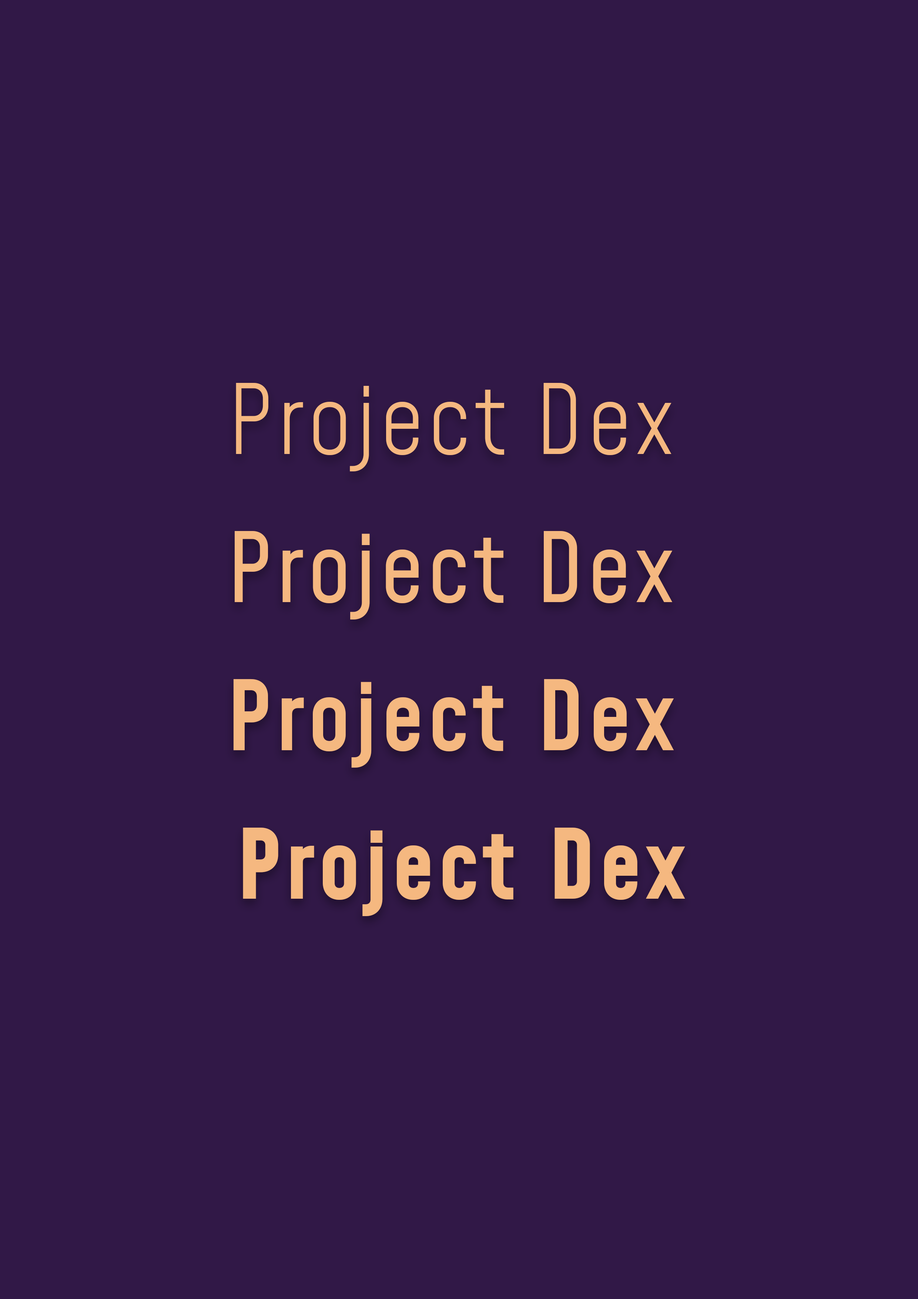
<style>
.page{position:relative;width:918px;height:1299px;background:#311847}
.page>*{position:absolute;margin:0}
.t1{font:94.7px "Mohave-Light";letter-spacing:0.05em;color:#f5b880}
.t2{font:94.7px "Mohave-Regular";letter-spacing:0.05em;color:#f5b880}
.t3{font:94.7px "Mohave-Medium";letter-spacing:0.05em;color:#f5b880}
.t4{font:94.7px "Mohave-Bold";letter-spacing:0.05em;color:#f5b880}
</style>
<div class="page">
<p class="t1" style="left:236px;top:383px;width:436px;height:88px">Project Dex</p>
<p class="t2" style="left:235px;top:531px;width:438px;height:88px">Project Dex</p>
<p class="t3" style="left:233px;top:679px;width:441px;height:88px">Project Dex</p>
<p class="t4" style="left:243px;top:827px;width:442px;height:89px">Project Dex</p>
</div>
